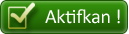
<style>
.page{position:relative;width:129px;height:34px}
.page>*{position:absolute;margin:0}
.t1{font:20px "Calibri";letter-spacing:-0.01em;color:#ffffff}
</style>
<div class="page">
<p class="t1" style="left:45px;top:9px;width:75px;height:15px">Aktifkan !</p>
</div>
